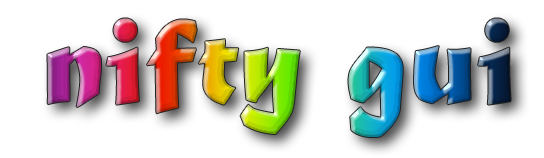
<style>
.page{position:relative;width:544px;height:158px;background:#ffffff}
.page>*{position:absolute;margin:0}
.t1{font:130px "MaturaMTScriptCapitals"}
</style>
<div class="page">
<p class="t1" style="left:47px;top:18px;width:464px;height:119px">nifty gui</p>
</div>
